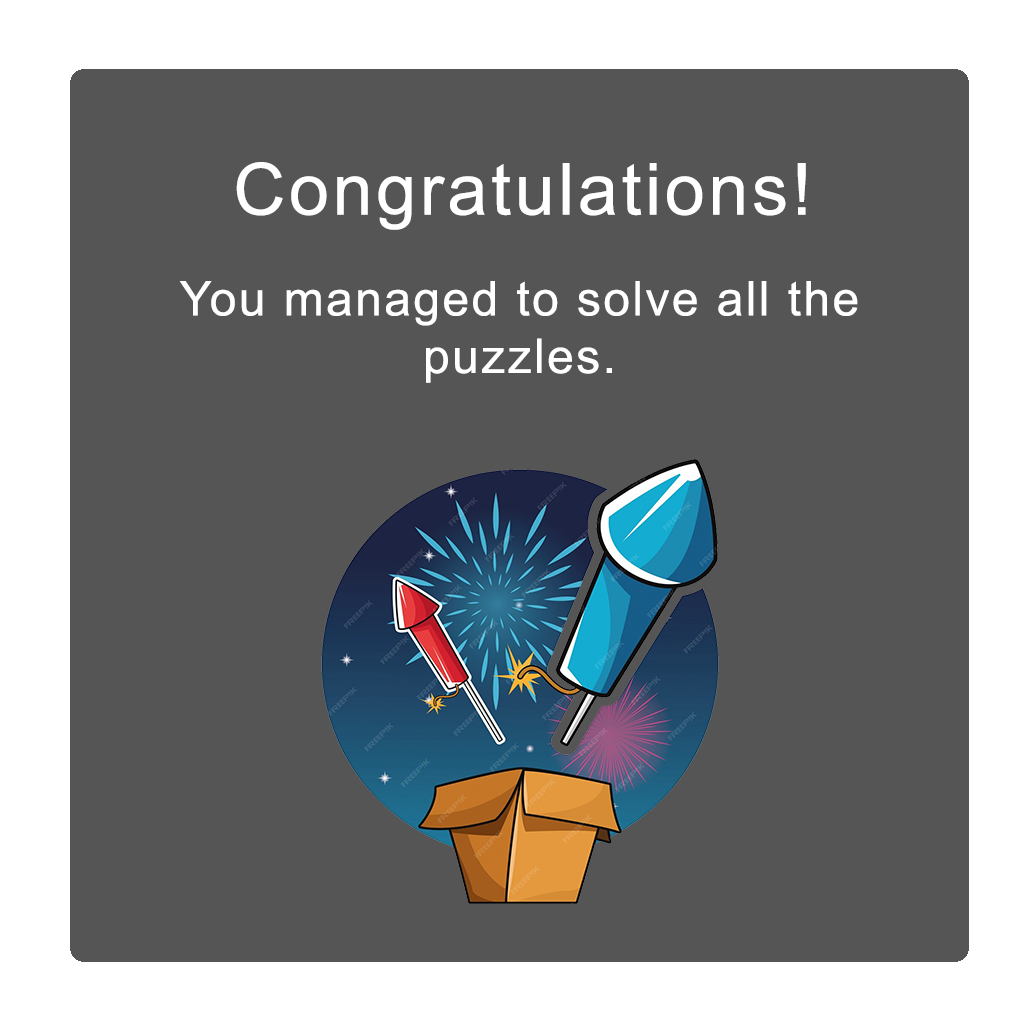
<style>
.page{position:relative;width:1024px;height:1024px;background:#555555}
.page>*{position:absolute;margin:0}
.t1{font:72px "ArialMT";letter-spacing:0.05em;color:#ffffff}
.t2{font:48px "ArialMT";letter-spacing:0.05em;color:#ffffff}
</style>
<div class="page">
<p class="t1" style="left:236px;top:162px;width:570px;height:68px">Congratulations!</p>
<p class="t2" style="left:179px;top:281px;width:679px;height:102px;text-align:center">You managed to solve all the puzzles.</p>
</div>
